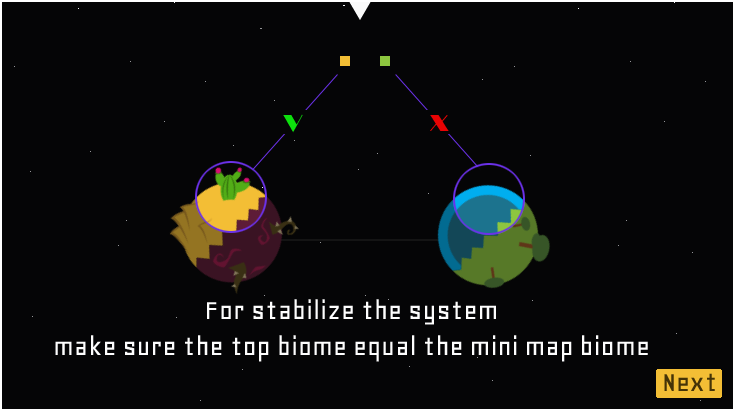
<style>
.page{position:relative;width:735px;height:411px;background:#050506}
.page>*{position:absolute;margin:0}
.t1{font:24px "Broadway";color:#0de00d}
.t2{font:24px "Broadway";color:#e90303}
.t3{font:30px "Geo-Regular";color:#fefefe}
.t4{font:30px "Geo-Regular";color:#443307}
</style>
<div class="page">
<p class="t1" style="left:283px;top:114px;width:20px;height:19px">V</p>
<p class="t2" style="left:430px;top:115px;width:19px;height:16px">X</p>
<p class="t3" style="left:55px;top:299px;width:593px;height:63px;text-align:center">For stabilize the system<br>make sure the top biome equal the mini map biome</p>
<p class="t4" style="left:664px;top:373px;width:51px;height:18px">Next</p>
</div>
